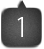
<style>
.page{position:relative;width:44px;height:49px}
.page>*{position:absolute;margin:0}
.t1{font:30px "MyriadPro-Light";letter-spacing:-0.025em;color:#ffffff}
</style>
<div class="page">
<p class="t1" style="left:17px;top:17px;width:6px;height:20px">1</p>
</div>
